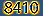
<style>
.page{position:relative;width:43px;height:16px;background:#2a547c}
.page>*{position:absolute;margin:0}
.t1{font:16.7px "MyriadPro-Regular";color:#000000}
</style>
<div class="page">
<p class="t1" style="left:4px;top:2px;width:34px;height:12px">8410</p>
</div>
